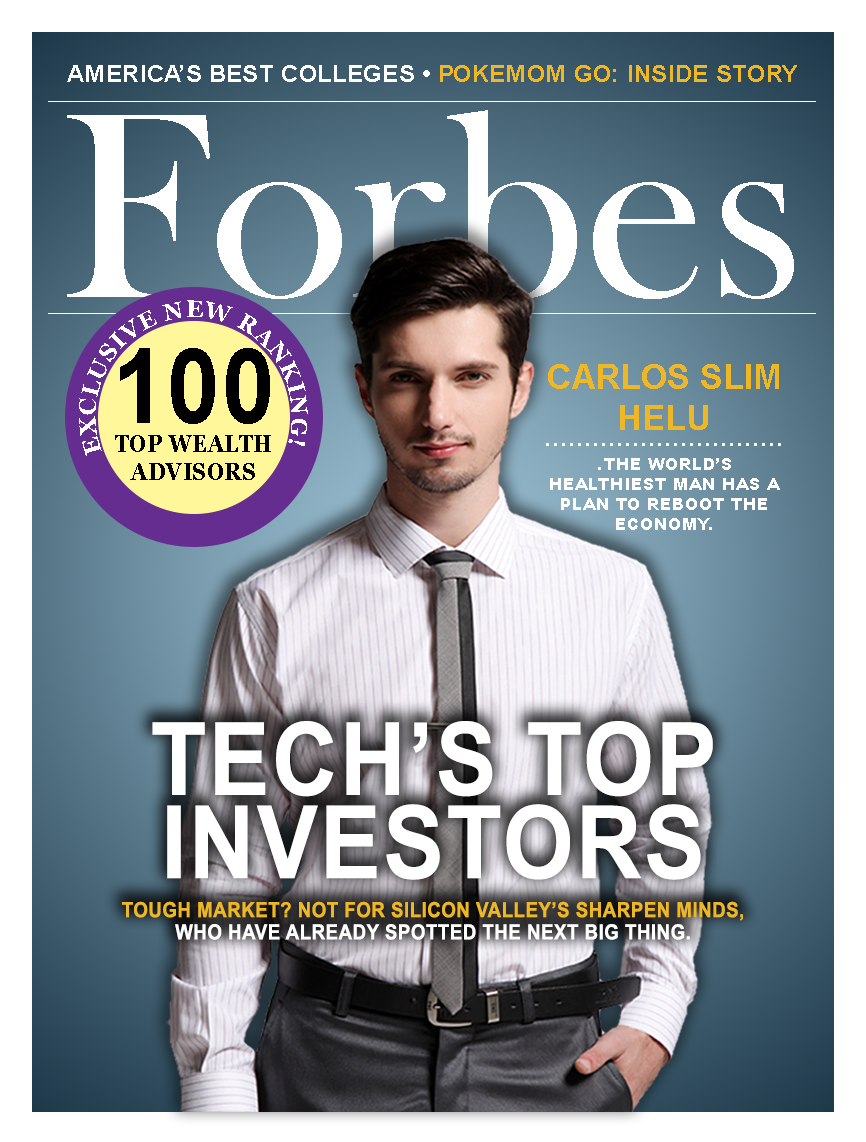
<style>
.page{position:relative;width:866px;height:1142px}
.page>*{position:absolute;margin:0}
.t1{font:24.3px "Arial-BoldMT";color:#ffffff}
.t2{font:24.3px "Arial-BoldMT";color:#edb726}
.t3{font:273px "BaskOldFace";color:#ffffff}
.t4{font:23.6px "Georgia-Bold";letter-spacing:0.025em;color:#ffffff;text-transform:uppercase}
.t5{font:23.6px "Georgia-Bold";letter-spacing:0.025em;color:#000000;text-transform:uppercase;scale:0.9 1}
.t6{font:104.2px "Arial-BoldMT";letter-spacing:0.025em;color:#000000;text-transform:uppercase;scale:0.9 1}
.t7{font:16.7px "Arial-Black";color:#ffffff;text-transform:uppercase}
.t8{font:34.7px "Arial-BoldMT";color:#edb726}
.t9{font:34.7px/15.3px "ArialNarrow";color:#ffffff}
.t10{font:20.8px/22.2px "Arial-BoldMT";letter-spacing:0.025em;color:#edb726;text-transform:uppercase;scale:0.9 1}
.t11{font:101.3px/83.3px "Arial-BoldMT";letter-spacing:0.025em;color:#ffffff;text-transform:uppercase;scale:0.9 1}
.t12{font:20.8px/22.2px "Arial-BoldMT";letter-spacing:0.025em;color:#ffffff;text-transform:uppercase;scale:0.9 1}
</style>
<div class="page">
<p class="t1" style="left:67px;top:65px;width:730px;height:17px">AMERICA’S BEST COLLEGES • <span class="t2">POKEMOM GO: INSIDE STORY</span></p>
<p class="t3" style="left:67px;top:110px;width:727px;height:191px">Forbes</p>
<p class="t4" style="left:79px;top:300px;width:229px;height:156px">exclusive new ranking!</p>
<p class="t5" style="left:115px;top:348px;width:156px;height:132px;text-align:center"><span class="t6">100<br></span>top wealth<br>advisors</p>
<p class="t7" style="left:546px;top:364px;width:235px;height:166px;text-align:center"><span class="t8">CARLOS SLIM HELU<br></span><span class="t9">...............................</span>the world’s <br>healthiest man has a plan to reboot the economy.</p>
<p class="t10" style="left:122px;top:721px;width:621px;height:219px;text-align:center"><span class="t11">TECH’S TOP <br>INVESTORs<br><br><br></span>tough market? not for silicon valley’s sharpen minds,<br><span class="t12">who have already spotted the next big thing.</span></p>
</div>
